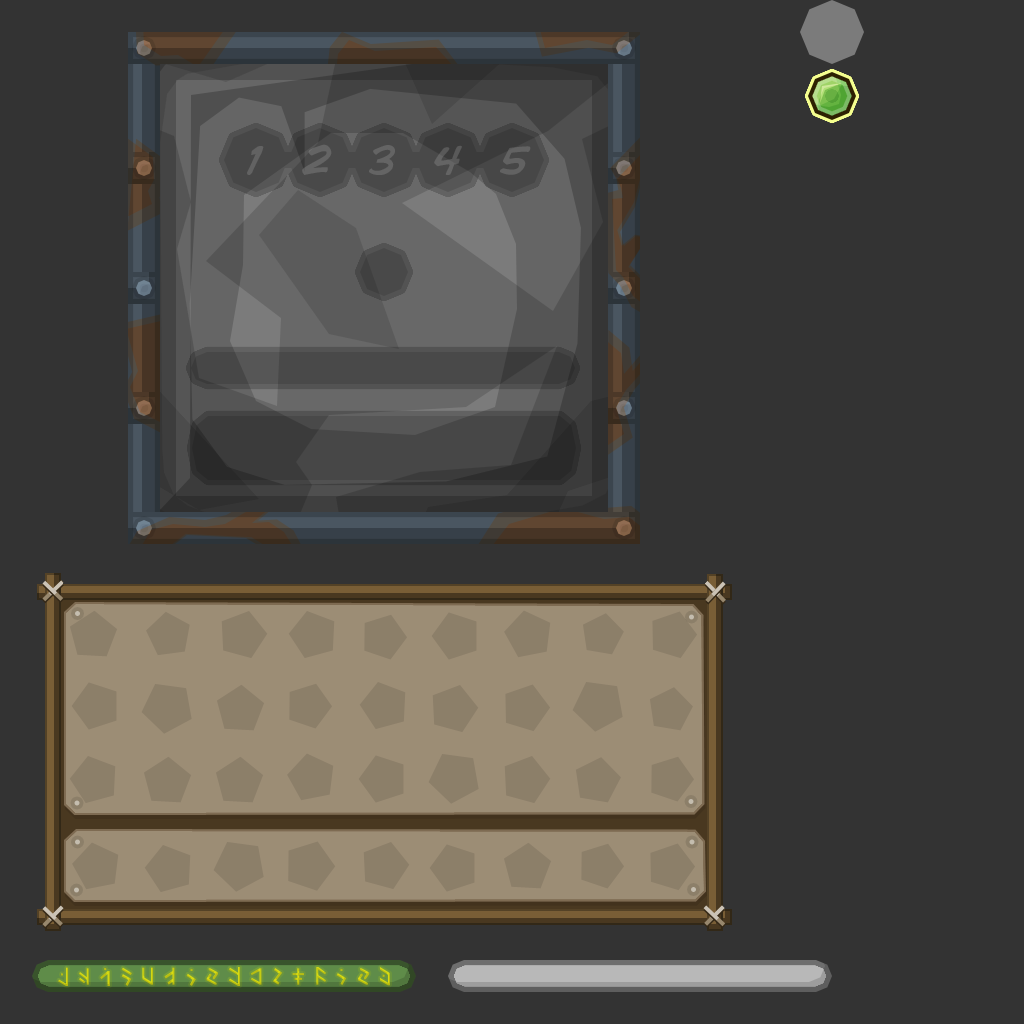
<style>
.page{position:relative;width:1024px;height:1024px;background:#333333}
.page>*{position:absolute;margin:0}
.t1{font:41.7px "ComicBook";color:#646464}
</style>
<div class="page">
<p class="t1" style="left:247px;top:144px;width:284px;height:31px">1   2   3   4   5</p>
</div>
